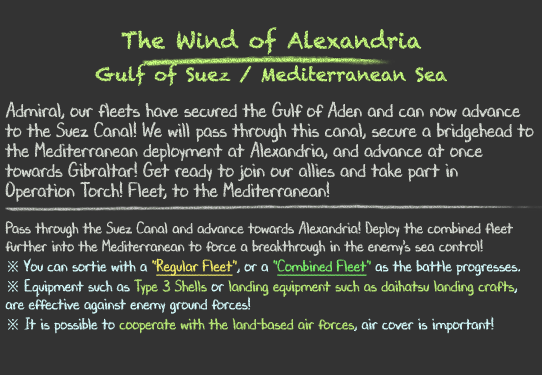
<style>
.page{position:relative;width:542px;height:375px;background:#333333}
.page>*{position:absolute;margin:0}
.t1{font:18px/36px "Chalkduster"}
.t2{font:22px/36px "Chalkduster"}
.t3{font:20px/20px "DJBChalkItUp";color:#d9ded6;scale:0.9 1}
.t4{font:16px/18px "DJBChalkItUp";color:#d9ded6;scale:0.9 1}
.t5{font:16px/20px "DJBChalkItUp";color:#d9ded6;scale:0.9 1}
.t6{font:16px/20px "TimesNewRomanPSMT";color:#d7feff;scale:0.9 1}
.t7{font:16px/20px "DJBChalkItUp";color:#d7feff;scale:0.9 1}
.t8{font:16px/20px "DJBChalkItUp";color:#f5ed68;scale:0.9 1}
.t9{font:16px/20px "DJBChalkItUp";color:#f5ed68;text-decoration:underline;scale:0.9 1}
.t10{font:16px/20px "DJBChalkItUp";color:#7bf26b;scale:0.9 1}
.t11{font:16px/20px "DJBChalkItUp";color:#7bf26b;text-decoration:underline;scale:0.9 1}
.t12{font:16px/18px "TimesNewRomanPSMT";color:#d7feff;scale:0.9 1}
.t13{font:16px/18px "DJBChalkItUp";color:#d7feff;scale:0.9 1}
.t14{font:16px/18px "DJBChalkItUp";color:#bdef78;scale:0.9 1}
</style>
<div class="page">
<p class="t1" style="left:95px;top:27px;width:352px;height:59px;text-align:center"><span class="t2">The Wind of Alexandria<br></span>Gulf of Suez / Mediterranean Sea</p>
<p class="t3" style="left:5px;top:101px;width:529px;height:233px">Admiral, our fleets have secured the Gulf of Aden and can now advance<br>to the Suez Canal! We will pass through this canal, secure a bridgehead to<br>the Mediterranean deployment at Alexandria, and advance at once<br>towards Gibraltar! Get ready to join our allies and take part in<br>Operation Torch! Fleet, to the Mediterranean!<br><br><span class="t4">Pass through the Suez Canal and advance towards Alexandria! Deploy the combined fleet<br></span><span class="t5">further into the Mediterranean to force a breakthrough in the enemy's sea control!<br></span><span class="t6">※ </span><span class="t7">You can sortie with a </span><span class="t8">"</span><span class="t9">Regular Fleet</span><span class="t8">"</span><span class="t7">, or a </span><span class="t10">"</span><span class="t11">Combined Fleet</span><span class="t10">" </span><span class="t7">as the battle progresses.<br></span><span class="t12">※</span><span class="t13"> Equipment such as </span><span class="t14">Type 3 Shells</span><span class="t13"> or </span><span class="t14">landing equipment such as daihatsu landing crafts</span><span class="t13">,<br></span><span class="t7">are effective against enemy ground forces!<br></span><span class="t12">※</span><span class="t13"> It is possible to </span><span class="t14">cooperate with the land-based air forces</span><span class="t13">, air cover is important!</span></p>
</div>
